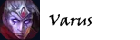
<style>
.page{position:relative;width:140px;height:40px;background:#ffffff}
.page>*{position:absolute;margin:0}
.t1{font:16px "VinerHandITC";color:#000000}
</style>
<div class="page">
<p class="t1" style="left:49px;top:14px;width:43px;height:13px">Varus</p>
</div>
